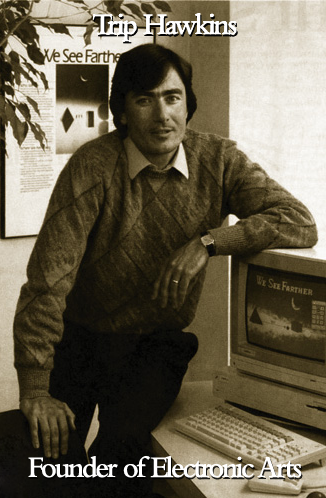
<style>
.page{position:relative;width:326px;height:498px}
.page>*{position:absolute;margin:0}
.t1{font:31.2px "BemboMT-SemiBold";letter-spacing:-0.08em;color:#ffffff;scale:0.95 1}
</style>
<div class="page">
<p class="t1" style="left:92px;top:13px;width:145px;height:29px">Trip Hawkins</p>
<p class="t1" style="left:92px;top:13px;width:145px;height:29px">Trip Hawkins</p>
<p class="t1" style="left:28px;top:456px;width:274px;height:22px">Founder of Electronic Arts</p>
</div>
